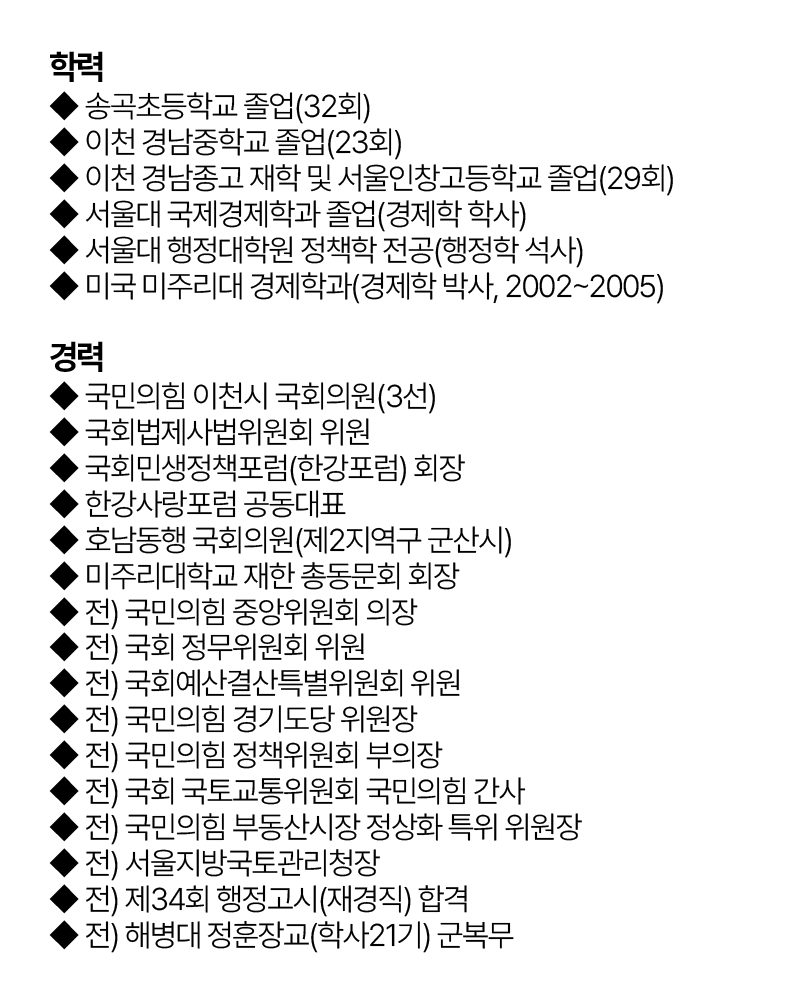
<style>
.page{position:relative;width:800px;height:1006px;background:#ffffff}
.page>*{position:absolute;margin:0}
.t1{font:31.2px/35.9px "Pretendard-Light";letter-spacing:-0.05em;color:#000000}
.t2{font:34px/38px "Pretendard-Bold";letter-spacing:-0.05em;color:#000000}
.t3{font:31.2px/38px "Pretendard-Light";letter-spacing:-0.05em;color:#000000}
.t4{font:34px/35.9px "Pretendard-Bold";letter-spacing:-0.05em;color:#000000}
</style>
<div class="page">
<p class="t1" style="left:49px;top:51px;width:624px;height:902px"><span class="t2">학력 <br></span>◆ <span class="t3">송곡초등학교 졸업</span>(32회)<br>◆ 이천 경남중학교 졸업(23회)<br>◆ 이천 경남종고 재학 및 서울인창고등학교 졸업(29회)<br>◆ 서울대 국제경제학과 졸업(경제학 학사)<br>◆ 서울대 행정대학원 정책학 전공(행정학 석사)<br>◆ 미국 미주리대 경제학과(경제학 박사, 2002~2005)<br><br><span class="t4">경력</span> <br>◆ 국민의힘 이<span class="t3">천시</span> 국회의원(3선)<br>◆ 국회법제사법위원회 위원  <br>◆ 국회민생정책포럼(한강포럼) 회장<br>◆ 한강사랑포럼 공동대표 <br>◆ 호남동행 국회의원(제2지역구 군산시)<br>◆ 미주리대학교 재한 총동문회 회장 <br>◆ 전) 국민의힘 중앙위원회 의장 <br>◆ 전) 국회 정무위원회 위원 <br>◆ 전) 국회예산결산특별위원회 위원 <br>◆ 전) 국민의힘 경기도당 위원장 <br>◆ 전) 국민의힘 정책위원회 부의장 <br>◆ 전) 국회 국토교통위원회 국민의힘 간사<br>◆ 전) 국민의힘 부동산시장 정상화 특위 위원장<br>◆ 전) 서울지방국토관리청장 <br>◆ 전) 제34회 행정고시(재경직) 합격<br>◆ 전) 해병대 정훈장교(학사21기) 군복무</p>
</div>
